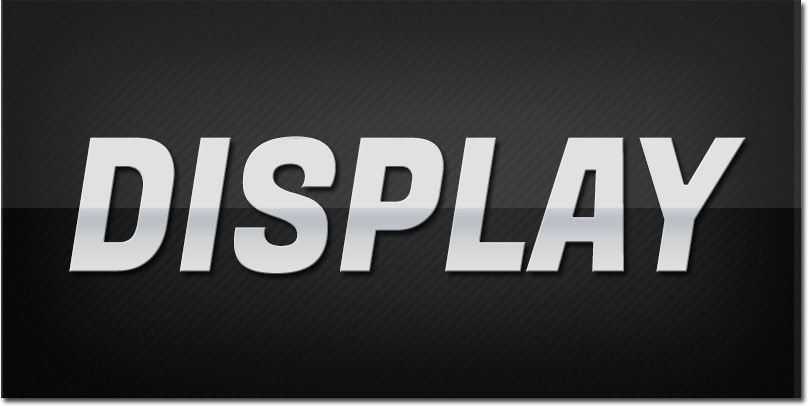
<style>
.page{position:relative;width:808px;height:406px}
.page>*{position:absolute;margin:0}
.t1{font:185.2px "FugazOne-Regular";color:#dfdfdf;scale:0.89 1}
</style>
<div class="page">
<p class="t1" style="left:69px;top:136px;width:677px;height:138px">DISPLAY</p>
</div>
